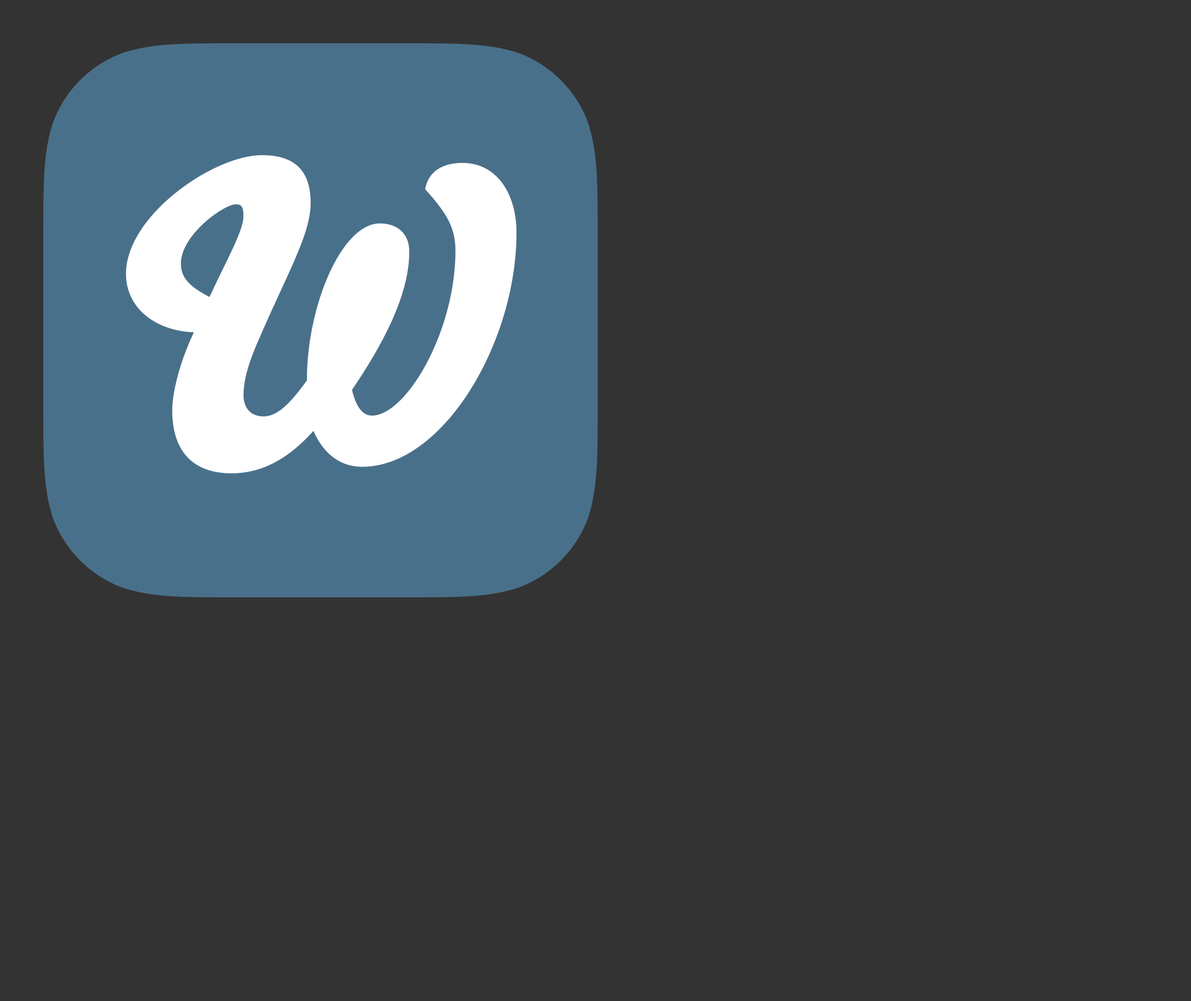
<style>
.page{position:relative;width:1191px;height:1001px;background:#333333}
.page>*{position:absolute;margin:0}
.t1{font:409px "Bello-Pro";color:#ffffff}
</style>
<div class="page">
<p class="t1" style="left:126px;top:155px;width:391px;height:319px">W</p>
</div>
